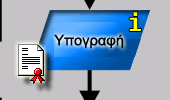
<style>
.page{position:relative;width:170px;height:100px;background:#c6c3c6}
.page>*{position:absolute;margin:0}
.t1{font:14.7px "ArialMT";color:#000000}
</style>
<div class="page">
<p class="t1" style="left:54px;top:34px;width:70px;height:15px">Υπογραφή</p>
</div>
